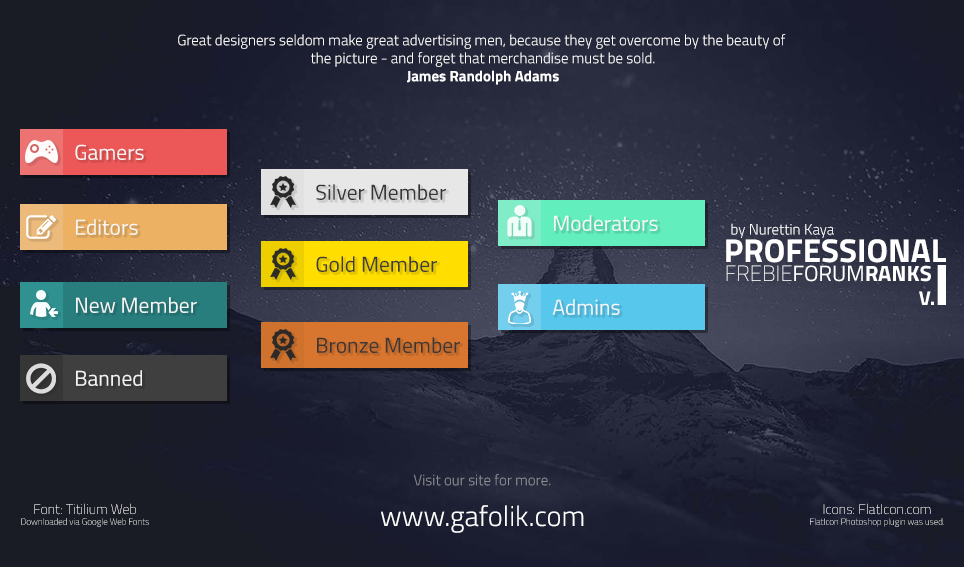
<style>
.page{position:relative;width:964px;height:567px}
.page>*{position:absolute;margin:0}
.t1{font:15px "TitilliumWeb-Light";color:#ffffff}
.t2{font:15px "TitilliumWeb-Bold";color:#ffffff}
.t3{font:21.5px "TitilliumWeb-Regular";color:#f7f7f7}
.t4{font:21.5px "TitilliumWeb-Regular";color:#2a2a2a}
.t5{font:33px "TitilliumWeb-Bold";color:#ffffff}
.t6{font:21.5px "TitilliumWeb-Regular";color:#353535}
.t7{font:22px "TitilliumWeb-Thin";color:#ffffff}
.t8{font:22px "TitilliumWeb-Regular";color:#ffffff}
.t9{font:22px "TitilliumWeb-Bold";color:#ffffff}
.t10{font:59px "TitilliumWeb-Bold";color:#ffffff}
.t11{font:20px "TitilliumWeb-Bold";color:#ffffff}
.t12{font:15px "TitilliumWeb-Light";color:#8d8e95}
.t13{font:9px "TitilliumWeb-Thin"}
.t14{font:14px "TitilliumWeb-Thin"}
.t15{font:28.5px "TitilliumWeb-Light";color:#ffffff}
</style>
<div class="page">
<p class="t1" style="left:178px;top:34px;width:608px;height:51px;text-align:center">Great designers seldom make great advertising men, because they get overcome by the beauty of <br>the picture - and forget that merchandise must be sold.<br><span class="t2">James Randolph Adams</span></p>
<p class="t3" style="left:75px;top:144px;width:69px;height:16px;opacity:0.97">Gamers</p>
<p class="t4" style="left:316px;top:184px;width:130px;height:16px;opacity:0.97">Silver Member</p>
<p class="t3" style="left:76px;top:219px;width:62px;height:16px;opacity:0.97">Editors</p>
<p class="t3" style="left:554px;top:215px;width:104px;height:16px;opacity:0.97">Moderators</p>
<p class="t1" style="left:731px;top:223px;width:103px;height:15px">by Nurettin Kaya</p>
<p class="t5" style="left:726px;top:239px;width:220px;height:24px">PROFESSIONAL</p>
<p class="t6" style="left:316px;top:256px;width:121px;height:16px;opacity:0.97">Gold Member</p>
<p class="t7" style="left:726px;top:265px;width:205px;height:17px">FREBIE<span class="t8">FORUM</span><span class="t9">RANKS</span></p>
<p class="t10" style="left:937px;top:265px;width:9px;height:40px">I</p>
<p class="t11" style="left:919px;top:291px;width:15px;height:14px">V.</p>
<p class="t3" style="left:76px;top:297px;width:121px;height:16px;opacity:0.97">New Member</p>
<p class="t3" style="left:552px;top:299px;width:68px;height:16px;opacity:0.97">Admins</p>
<p class="t6" style="left:317px;top:337px;width:143px;height:16px;opacity:0.97">Bronze Member</p>
<p class="t3" style="left:76px;top:370px;width:66px;height:16px;opacity:0.97">Banned</p>
<p class="t12" style="left:414px;top:474px;width:137px;height:12px">Visit our site for more.</p>
<p class="t13" style="left:21px;top:503px;width:128px;height:24px;text-align:center"><span class="t14">Font: Titilium Web<br></span>Downloaded via Google Web Fonts</p>
<p class="t15" style="left:381px;top:505px;width:203px;height:28px">www.gafolik.com</p>
<p class="t13" style="left:810px;top:503px;width:134px;height:24px;text-align:center"><span class="t14">Icons: FlatIcon.com<br></span>FlatIcon Photoshop plugin was used.</p>
</div>
